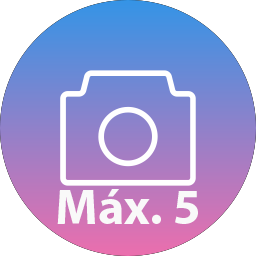
<style>
.page{position:relative;width:256px;height:256px;background:#ffffff}
.page>*{position:absolute;margin:0}
.t1{font:50px "MyriadPro-Bold";color:#f9f9f9}
</style>
<div class="page">
<p class="t1" style="left:57px;top:189px;width:141px;height:35px">Máx. 5</p>
</div>
